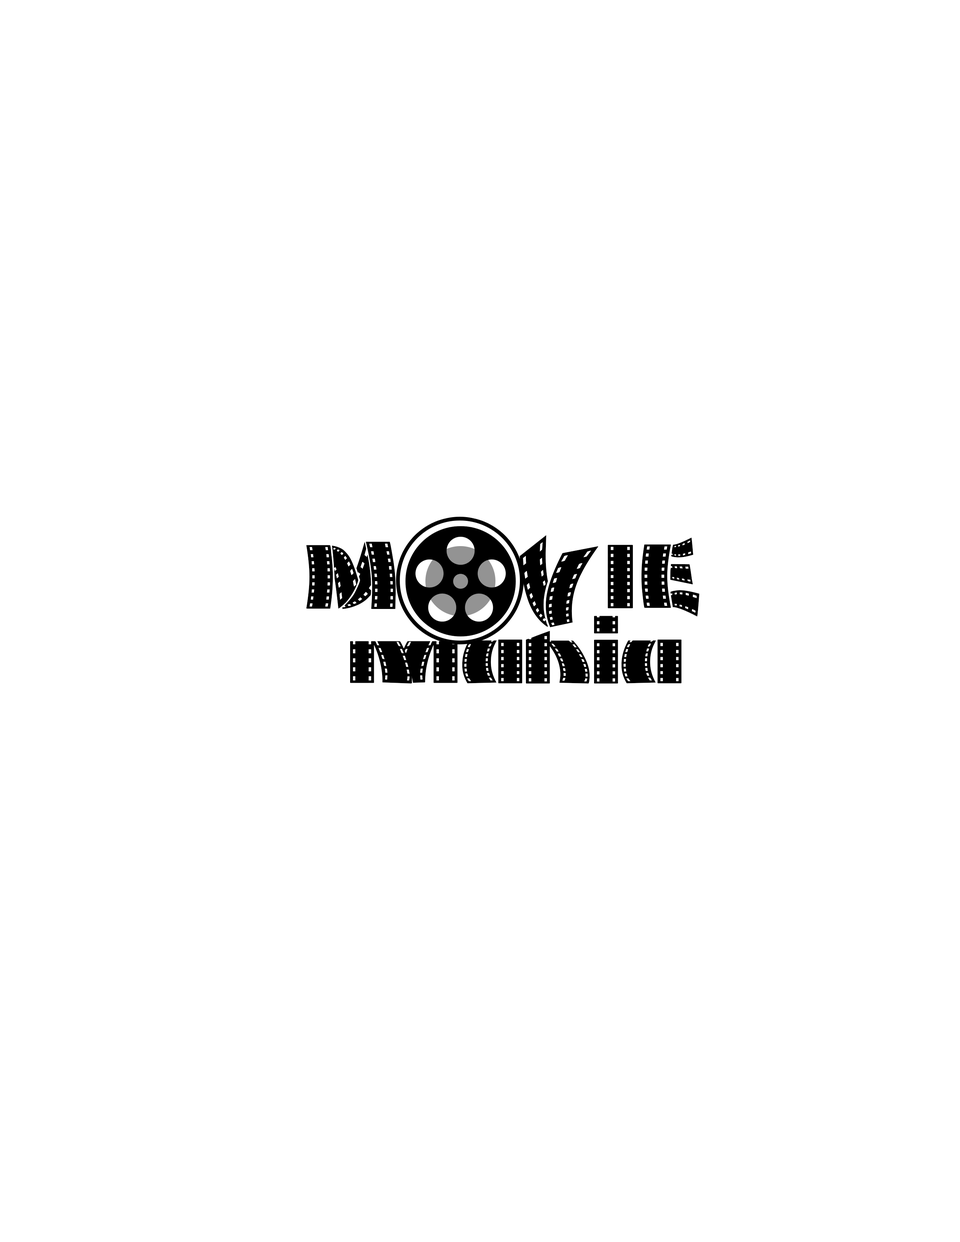
<style>
.page{position:relative;width:960px;height:1242px;background:#ffffff}
.page>*{position:absolute;margin:0}
.t1{font:90.2px "MovieFilmstrip";color:#000000}
</style>
<div class="page">
<p class="t1" style="left:306px;top:535px;width:393px;height:93px">M    VIE</p>
<p class="t1" style="left:350px;top:616px;width:332px;height:68px">mania</p>
</div>
